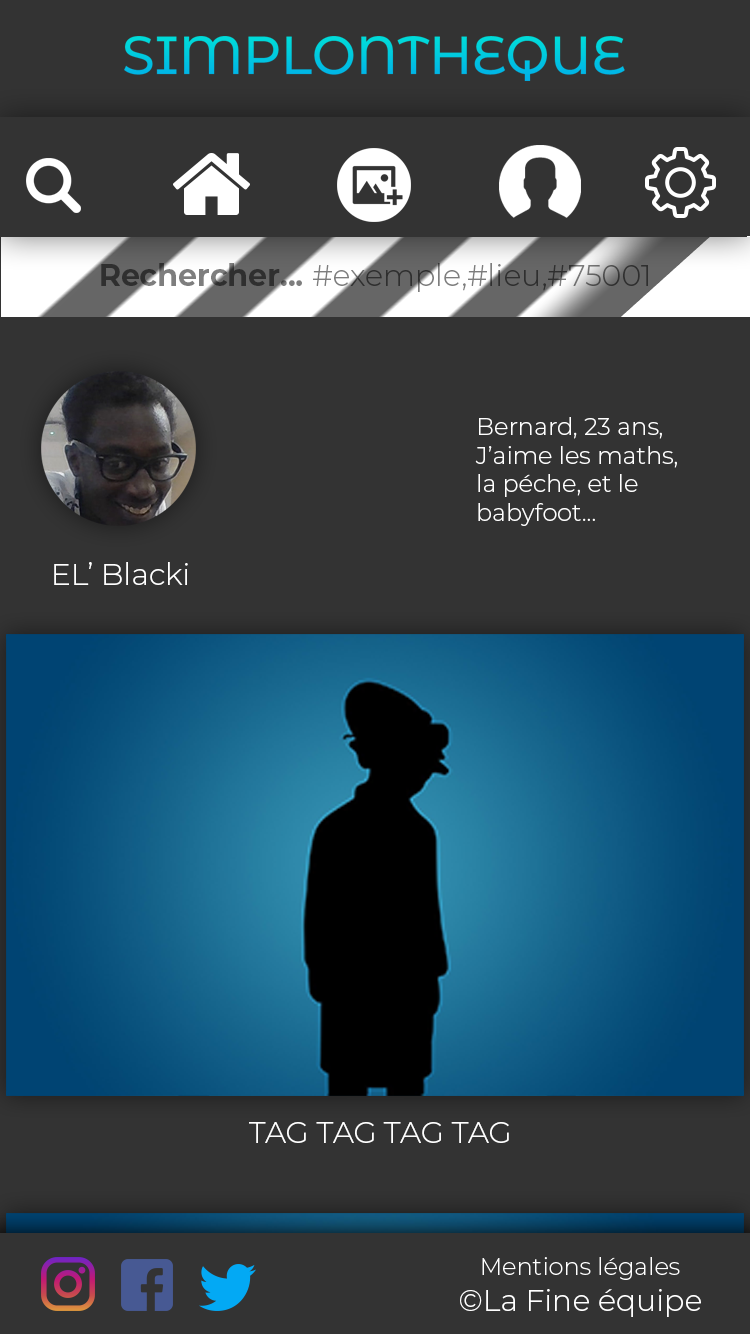
<style>
.page{position:relative;width:750px;height:1334px;background:#333333}
.page>*{position:absolute;margin:0}
.t1{font:30px "Montserrat-Light"}
.t2{font:30px "Montserrat-Bold"}
.t3{font:24px "Montserrat-Light";color:#ffffff}
.t4{font:30px "Montserrat-Light";color:#ffffff}
</style>
<div class="page">
<p class="t1" style="left:101px;top:263px;width:547px;height:29px"><span class="t2">Rechercher... </span>#exemple,#lieu,#75001</p>
<p class="t3" style="left:475px;top:417px;width:202px;height:109px">Bernard, 23 ans,<br>J’aime les maths,<br>la péche, et le <br>babyfoot...</p>
<p class="t4" style="left:54px;top:562px;width:134px;height:23px">EL’ Blacki</p>
<p class="t4" style="left:249px;top:1122px;width:260px;height:21px">TAG TAG TAG TAG</p>
<p class="t4" style="left:460px;top:1289px;width:241px;height:28px">©La Fine équipe</p>
</div>
